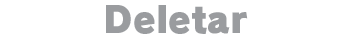
<style>
.page{position:relative;width:350px;height:40px;background:#ffffff}
.page>*{position:absolute;margin:0}
.t1{font:36px "RodinPro-UB";color:#9a9c9f}
</style>
<div class="page">
<p class="t1" style="left:106px;top:5px;width:142px;height:29px">Deletar</p>
</div>
